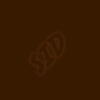
<style>
.page{position:relative;width:100px;height:100px;background:#381a00}
.page>*{position:absolute;margin:0}
.t1{font:30px "AdventureNormal";color:#381a00}
</style>
<div class="page">
<p class="t1" style="left:30px;top:33px;width:34px;height:42px;rotate:-43deg">SID</p>
</div>
